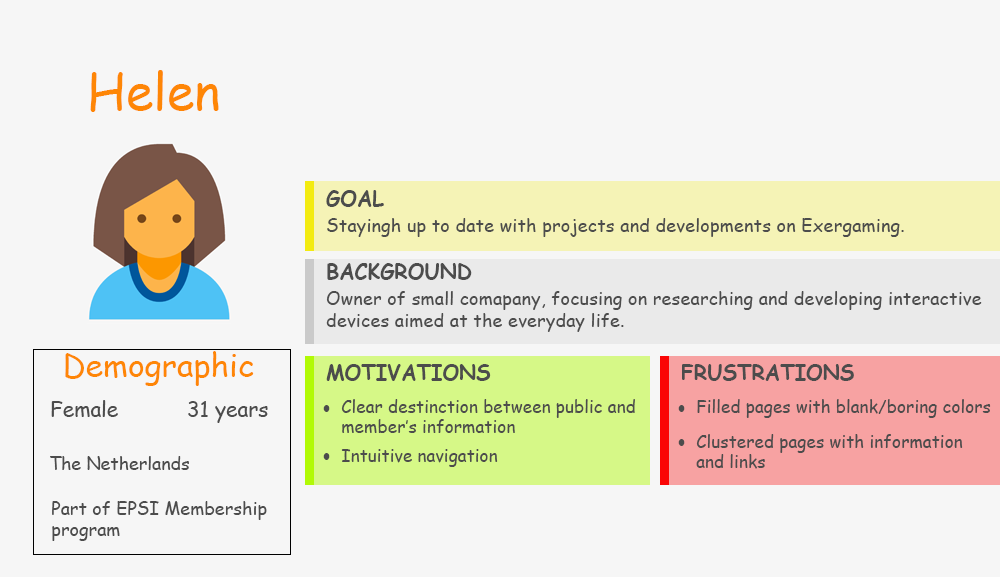
<style>
.page{position:relative;width:1000px;height:577px;background:#f6f6f6}
.page>*{position:absolute;margin:0}
.t1{font:50px "ComicSansMS";color:#fe8606}
.t2{font:20.9px "ComicSansMS-Bold";color:#4c4c4c}
.t3{font:18.3px "ComicSansMS";color:#4c4c4c}
.t4{font:32px "ComicSansMS";color:#fe8606}
.t5{font:20.9px "ComicSansMS";color:#4c4c4c}
.t6{font:17.3px "ComicSansMS";color:#4c4c4c}
.t7{font:55.4px "ComicSansMS-Bold";color:#4c4c4c;scale:0.63 1}
.t8{font:17.8px "ComicSansMS";color:#4c4c4c}
.t9{font:18px "ComicSansMS";color:#4c4c4c}
</style>
<div class="page">
<p class="t1" style="left:90px;top:70px;width:129px;height:42px">Helen</p>
<p class="t2" style="left:326px;top:190px;width:58px;height:17px">GOAL</p>
<p class="t3" style="left:327px;top:218px;width:577px;height:19px">Stayingh up to date with projects and developments on Exergaming.</p>
<p class="t2" style="left:327px;top:263px;width:145px;height:17px">BACKGROUND</p>
<p class="t3" style="left:326px;top:291px;width:656px;height:41px">Owner of small comapany, focusing on researching and developing interactive devices aimed at the everyday life.</p>
<p class="t4" style="left:65px;top:351px;width:189px;height:35px">Demographic</p>
<p class="t2" style="left:326px;top:364px;width:165px;height:17px">MOTIVATIONS</p>
<p class="t2" style="left:682px;top:364px;width:172px;height:17px">FRUSTRATIONS</p>
<p class="t5" style="left:51px;top:400px;width:217px;height:23px">Female           31 years</p>
<p class="t6" style="left:341px;top:399px;width:294px;height:34px">Clear destinction between public and member’s information</p>
<p class="t6" style="left:697px;top:399px;width:294px;height:19px">Filled pages with blank/boring colors</p>
<p class="t7" style="left:323px;top:405px;width:7px;height:7px">.</p>
<p class="t7" style="left:678px;top:405px;width:7px;height:7px">.</p>
<p class="t6" style="left:696px;top:434px;width:267px;height:35px">Clustered pages with information and links</p>
<p class="t6" style="left:341px;top:449px;width:157px;height:18px">Intuitive navigation</p>
<p class="t7" style="left:678px;top:439px;width:7px;height:7px">.</p>
<p class="t8" style="left:50px;top:456px;width:139px;height:14px">The Netherlands</p>
<p class="t7" style="left:323px;top:453px;width:7px;height:7px">.</p>
<p class="t9" style="left:52px;top:501px;width:215px;height:40px">Part of EPSI Membership<br>program</p>
</div>
